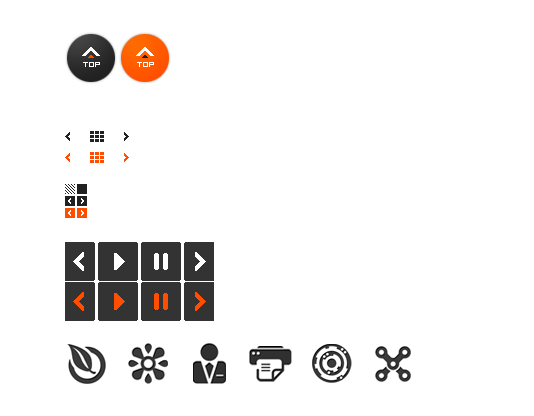
<style>
.page{position:relative;width:534px;height:416px;background:#ffffff}
.page>*{position:absolute;margin:0}
.t1{font:8px "04b08";color:#ffffff}
</style>
<div class="page">
<p class="t1" style="left:83px;top:62px;width:17px;height:5px">TOP</p>
<p class="t1" style="left:137px;top:62px;width:17px;height:5px">TOP</p>
</div>
